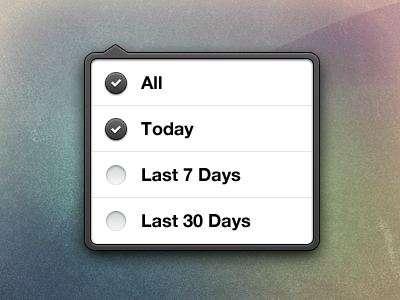
<style>
.page{position:relative;width:400px;height:300px;background:#ffffff}
.page>*{position:absolute;margin:0}
.t1{font:18px/46px "HelveticaNeue-Bold";color:#000000}
</style>
<div class="page">
<p class="t1" style="left:141px;top:76px;width:110px;height:155px">All<br>Today<br>Last 7 Days<br>Last 30 Days</p>
</div>
